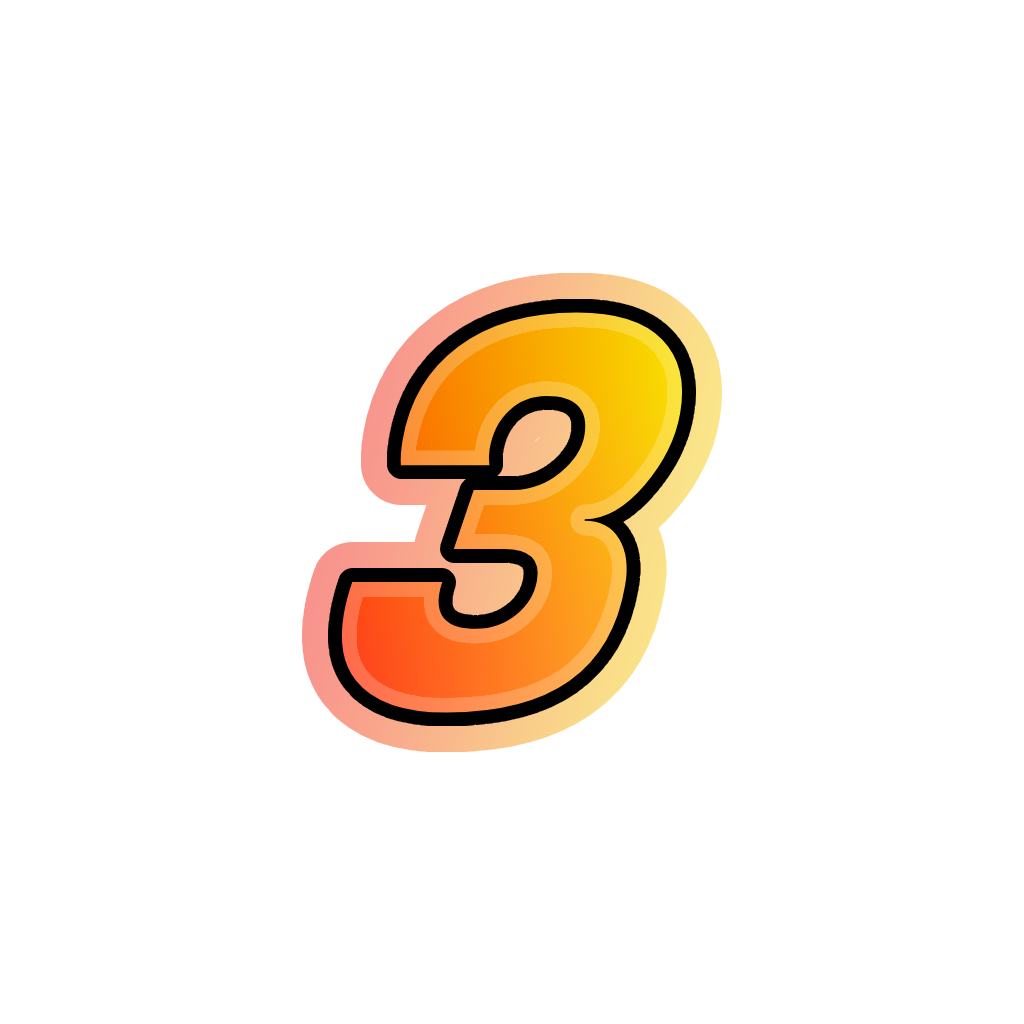
<style>
.page{position:relative;width:1024px;height:1024px;background:#ffffff}
.page>*{position:absolute;margin:0}
.t1{font:540px "FugazOne-Regular";font-style:italic;scale:0.93 1}
</style>
<div class="page">
<p class="t1" style="left:336px;top:312px;width:353px;height:401px">3</p>
</div>
